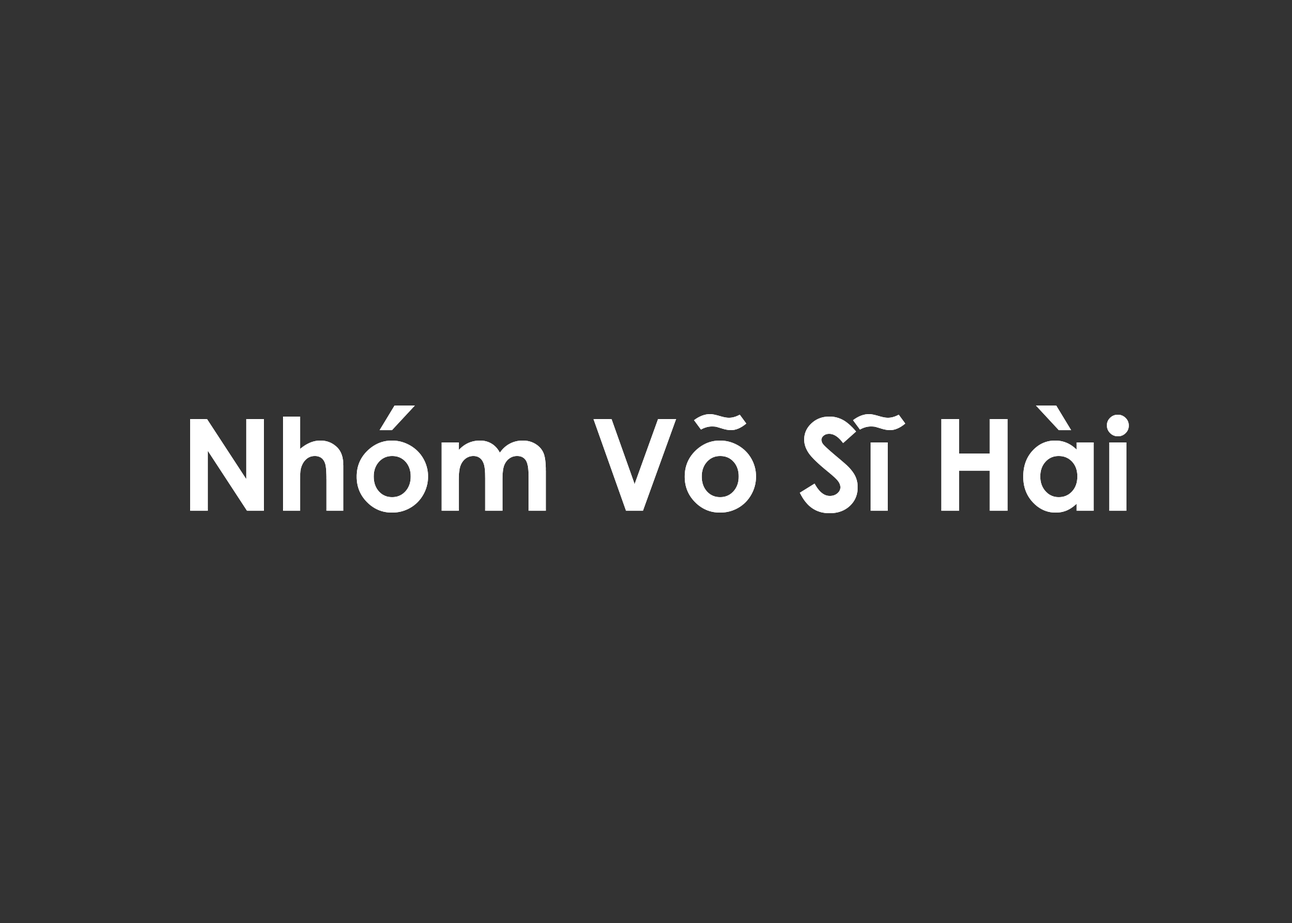
<style>
.page{position:relative;width:1292px;height:923px;background:#333333}
.page>*{position:absolute;margin:0}
.t1{font:128.2px "CenturyGothic-Bold";color:#ffffff}
</style>
<div class="page">
<p class="t1" style="left:190px;top:405px;width:939px;height:108px">Nhóm Võ Sĩ Hài</p>
<p class="t1" style="left:190px;top:405px;width:939px;height:108px">Nhóm Võ Sĩ Hài</p>
</div>
